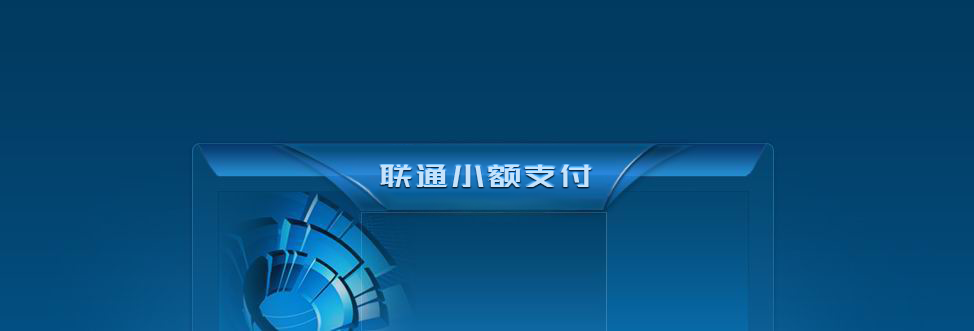
<style>
.page{position:relative;width:974px;height:331px}
.page>*{position:absolute;margin:0}
.t1{font:36px "huxiaobo-gdh";color:#c5e3fb}
</style>
<div class="page">
<p class="t1" style="left:380px;top:165px;width:212px;height:22px">联通小额支付</p>
</div>
